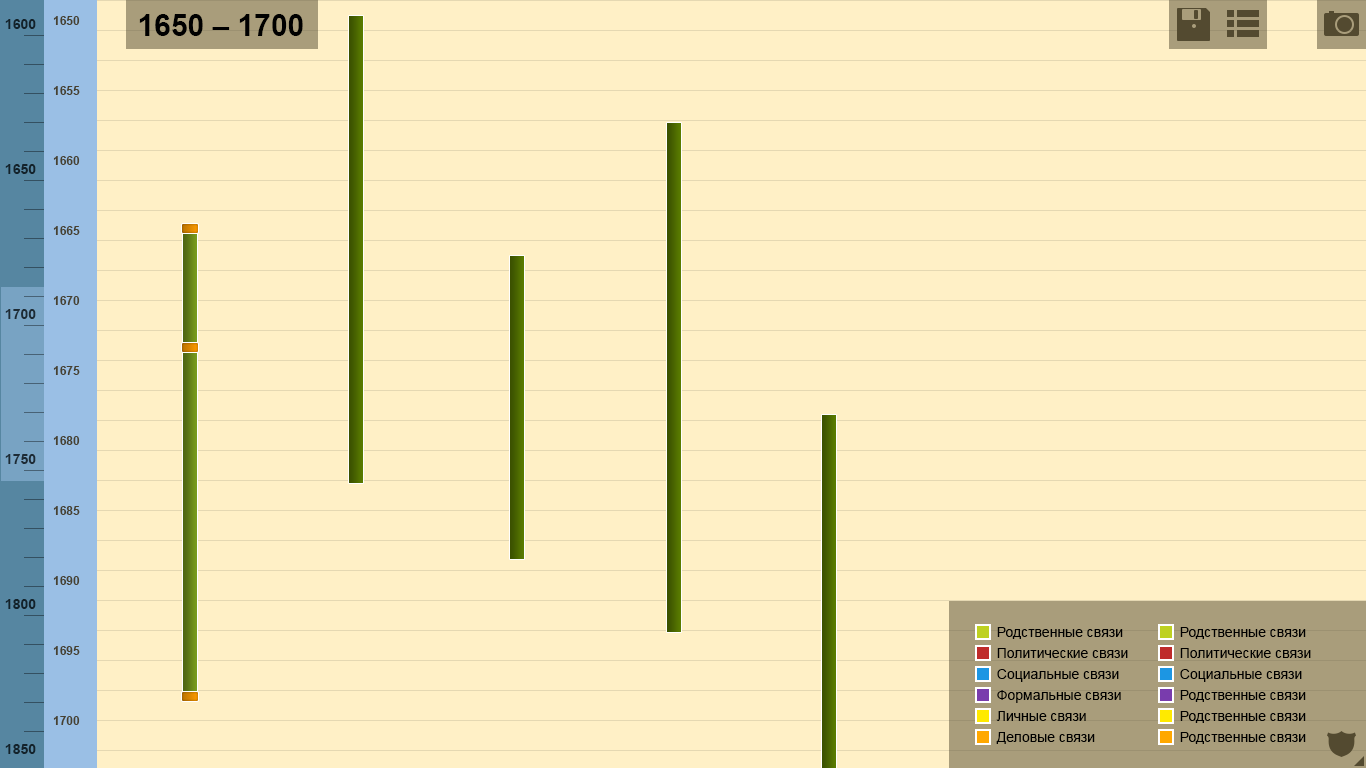
<style>
.page{position:relative;width:1366px;height:768px;background:#fff0c6}
.page>*{position:absolute;margin:0}
.t1{font:12px/14px "Arial-BoldMT";color:#474130}
.t2{font:30px "Arial-BoldMT";color:#000000}
.t3{font:14px/29px "Arial-BoldMT";color:#13222a}
.t4{font:14px "ArialMT";color:#000000}
</style>
<div class="page">
<p class="t1" style="left:53px;top:16px;width:27px;height:709px">1650<br><br><br><br><br>1655<br><br><br><br><br>1660<br><br><br><br><br>1665<br><br><br><br><br>1670<br><br><br><br><br>1675<br><br><br><br><br>1680<br><br><br><br><br>1685<br><br><br><br><br>1690<br><br><br><br><br>1695<br><br><br><br><br>1700</p>
<p class="t2" style="left:139px;top:14px;width:164px;height:22px">1650 – 1700</p>
<p class="t3" style="left:5px;top:19px;width:31px;height:735px;text-align:right">1600<br><br><br><br><br>1650<br><br><br><br><br>1700<br><br><br><br><br>1750<br><br><br><br><br>1800<br><br><br><br><br>1850</p>
<p class="t4" style="left:997px;top:627px;width:126px;height:12px">Родственные связи</p>
<p class="t4" style="left:1180px;top:627px;width:126px;height:12px">Родственные связи</p>
<p class="t4" style="left:997px;top:648px;width:131px;height:10px">Политические связи</p>
<p class="t4" style="left:1180px;top:648px;width:131px;height:10px">Политические связи</p>
<p class="t4" style="left:997px;top:669px;width:122px;height:13px">Социальные связи</p>
<p class="t4" style="left:1180px;top:669px;width:122px;height:13px">Социальные связи</p>
<p class="t4" style="left:997px;top:690px;width:124px;height:13px">Формальные связи</p>
<p class="t4" style="left:1180px;top:690px;width:126px;height:12px">Родственные связи</p>
<p class="t4" style="left:996px;top:711px;width:90px;height:10px">Личные связи</p>
<p class="t4" style="left:1180px;top:711px;width:126px;height:12px">Родственные связи</p>
<p class="t4" style="left:996px;top:732px;width:99px;height:12px">Деловые связи</p>
<p class="t4" style="left:1180px;top:732px;width:126px;height:12px">Родственные связи</p>
</div>
